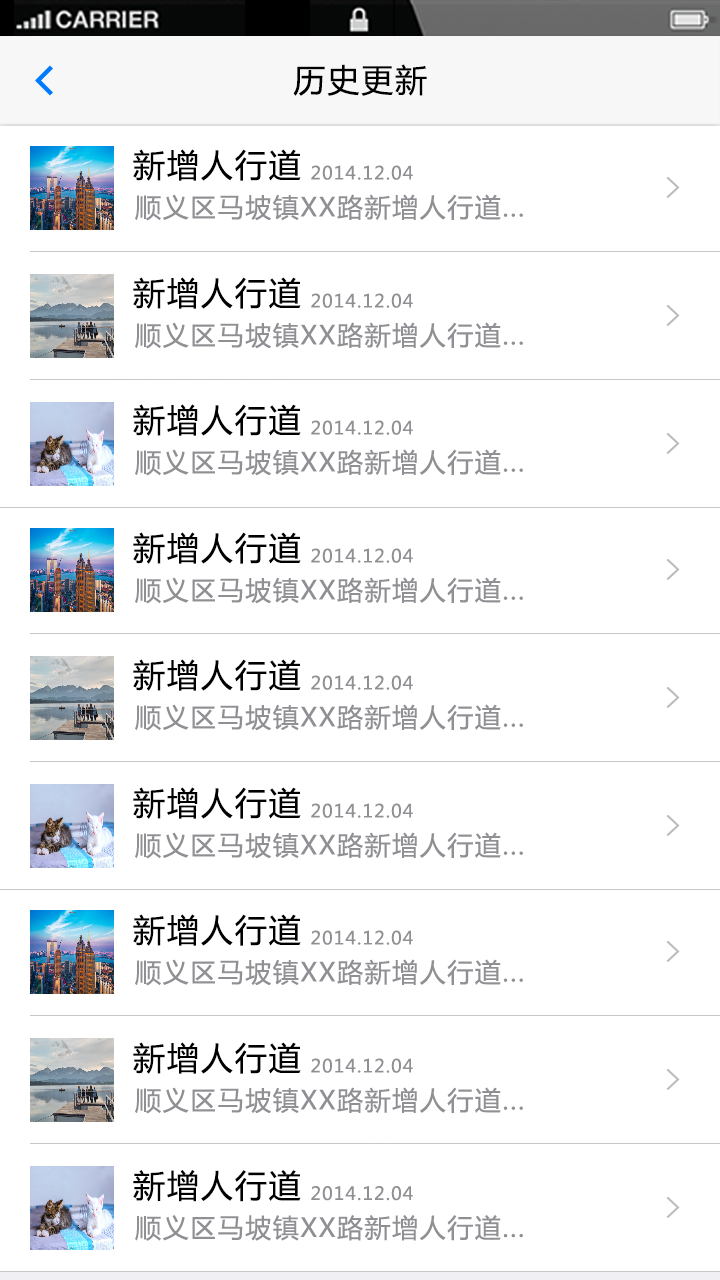
<style>
.page{position:relative;width:720px;height:1280px;background:#ffffff}
.page>*{position:absolute;margin:0}
.t1{font:32px "MicrosoftYaHei";letter-spacing:0.06em;color:#000000}
.t2{font:18px "MicrosoftYaHei";letter-spacing:0.06em;color:#8f8f94}
.t3{font:26px "MicrosoftYaHei";letter-spacing:0.06em;color:#8f8f94}
</style>
<div class="page">
<p class="t1" style="left:293px;top:64px;width:134px;height:32px">历史更新</p>
<p class="t1" style="left:133px;top:149px;width:168px;height:32px">新增人行道</p>
<p class="t2" style="left:311px;top:165px;width:102px;height:15px">2014.12.04</p>
<p class="t3" style="left:135px;top:194px;width:388px;height:27px">顺义区马坡镇XX路新增人行道...</p>
<p class="t1" style="left:133px;top:277px;width:168px;height:32px">新增人行道</p>
<p class="t2" style="left:311px;top:293px;width:102px;height:15px">2014.12.04</p>
<p class="t3" style="left:135px;top:322px;width:388px;height:27px">顺义区马坡镇XX路新增人行道...</p>
<p class="t1" style="left:133px;top:404px;width:168px;height:32px">新增人行道</p>
<p class="t2" style="left:311px;top:420px;width:102px;height:15px">2014.12.04</p>
<p class="t3" style="left:135px;top:449px;width:388px;height:27px">顺义区马坡镇XX路新增人行道...</p>
<p class="t1" style="left:133px;top:532px;width:168px;height:32px">新增人行道</p>
<p class="t2" style="left:311px;top:548px;width:102px;height:15px">2014.12.04</p>
<p class="t3" style="left:135px;top:577px;width:388px;height:27px">顺义区马坡镇XX路新增人行道...</p>
<p class="t1" style="left:133px;top:659px;width:168px;height:32px">新增人行道</p>
<p class="t2" style="left:311px;top:675px;width:102px;height:15px">2014.12.04</p>
<p class="t3" style="left:135px;top:704px;width:388px;height:27px">顺义区马坡镇XX路新增人行道...</p>
<p class="t1" style="left:133px;top:787px;width:168px;height:32px">新增人行道</p>
<p class="t2" style="left:311px;top:803px;width:102px;height:15px">2014.12.04</p>
<p class="t3" style="left:135px;top:832px;width:388px;height:27px">顺义区马坡镇XX路新增人行道...</p>
<p class="t1" style="left:133px;top:914px;width:168px;height:32px">新增人行道</p>
<p class="t2" style="left:311px;top:930px;width:102px;height:15px">2014.12.04</p>
<p class="t3" style="left:135px;top:959px;width:388px;height:27px">顺义区马坡镇XX路新增人行道...</p>
<p class="t1" style="left:133px;top:1042px;width:168px;height:32px">新增人行道</p>
<p class="t2" style="left:311px;top:1058px;width:102px;height:15px">2014.12.04</p>
<p class="t3" style="left:135px;top:1087px;width:388px;height:27px">顺义区马坡镇XX路新增人行道...</p>
<p class="t1" style="left:133px;top:1170px;width:168px;height:32px">新增人行道</p>
<p class="t2" style="left:311px;top:1186px;width:102px;height:15px">2014.12.04</p>
<p class="t3" style="left:135px;top:1215px;width:388px;height:26px">顺义区马坡镇XX路新增人行道...</p>
</div>
